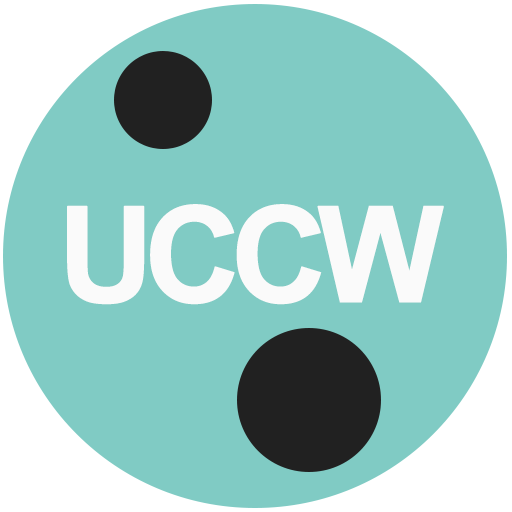
<style>
.page{position:relative;width:512px;height:512px;background:#80cbc4}
.page>*{position:absolute;margin:0}
.t1{font:133.3px "Arial-BoldMT";letter-spacing:-0.1em;color:#fafafa;font-weight:bold}
</style>
<div class="page">
<p class="t1" style="left:67px;top:204px;width:377px;height:101px">UCCW</p>
</div>
